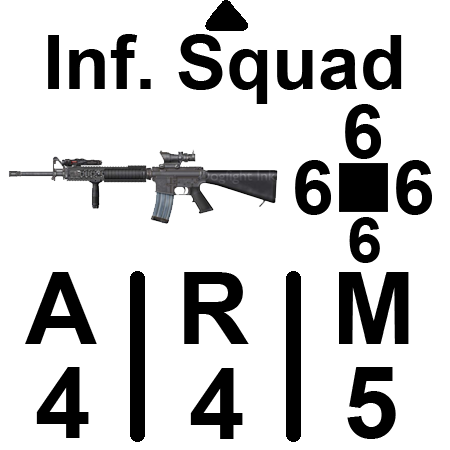
<style>
.page{position:relative;width:450px;height:450px;background:#ffffff}
.page>*{position:absolute;margin:0}
.t1{font:75px "Arial-BoldMT";color:#000000}
.t2{font:62.5px "Arial-BoldMT";color:#000000}
.t3{font:100px "Arial-BoldMT";color:#000000}
</style>
<div class="page">
<p class="t1" style="left:48px;top:34px;width:354px;height:70px">Inf. Squad</p>
<p class="t1" style="left:345px;top:104px;width:36px;height:55px">6</p>
<p class="t1" style="left:295px;top:160px;width:36px;height:55px">6</p>
<p class="t1" style="left:396px;top:160px;width:36px;height:55px">6</p>
<p class="t2" style="left:349px;top:217px;width:31px;height:46px">6</p>
<p class="t3" style="left:25px;top:272px;width:384px;height:72px">A   R   M</p>
<p class="t3" style="left:36px;top:367px;width:53px;height:71px">4</p>
<p class="t3" style="left:190px;top:368px;width:53px;height:71px">4</p>
<p class="t3" style="left:347px;top:367px;width:49px;height:72px">5</p>
</div>
